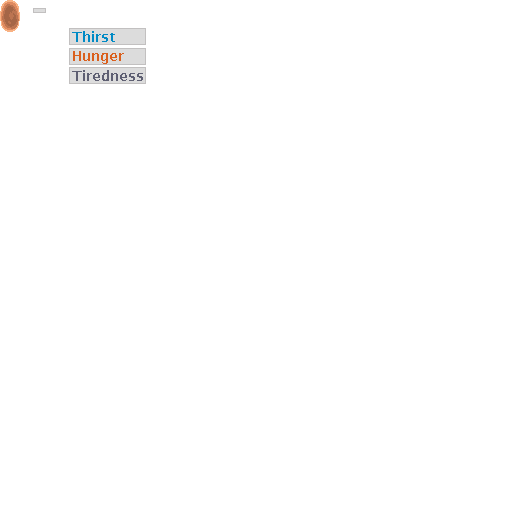
<style>
.page{position:relative;width:512px;height:512px;background:#ffffff}
.page>*{position:absolute;margin:0}
.t1{font:14px "LucidaSans-Demi";color:#008ac5}
.t2{font:14px "LucidaSans";color:#ffffff}
.t3{font:14px "LucidaSans-Demi";color:#da5f1d}
.t4{font:14px "LucidaSans-Demi";color:#8ac5ff}
.t5{font:14px "LucidaSans-Demi";color:#5e5f72}
</style>
<div class="page">
<p class="t1" style="left:72px;top:31px;width:43px;height:11px"><span class="t2"><br></span>Thirst</p>
<p class="t3" style="left:73px;top:51px;width:51px;height:13px"><span class="t4"><br></span>Hunger</p>
<p class="t5" style="left:72px;top:70px;width:71px;height:11px"><span class="t3"><br></span>Tiredness</p>
</div>
